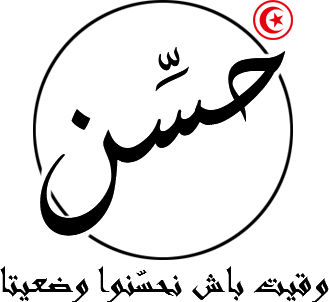
<style>
.page{position:relative;width:329px;height:302px;background:#ffffff}
.page>*{position:absolute;margin:0}
.t1{font:228px "Aldhabi";color:#000000;text-transform:uppercase}
.t2{font:43.3px "Andalus";color:#000000;text-transform:uppercase}
</style>
<div class="page">
<p class="t1" style="left:40px;top:47px;width:246px;height:189px">حسِّن</p>
<p class="t2" style="left:0px;top:266px;width:329px;height:36px">وقيت باش نحسّنوا وضعيتا</p>
</div>
